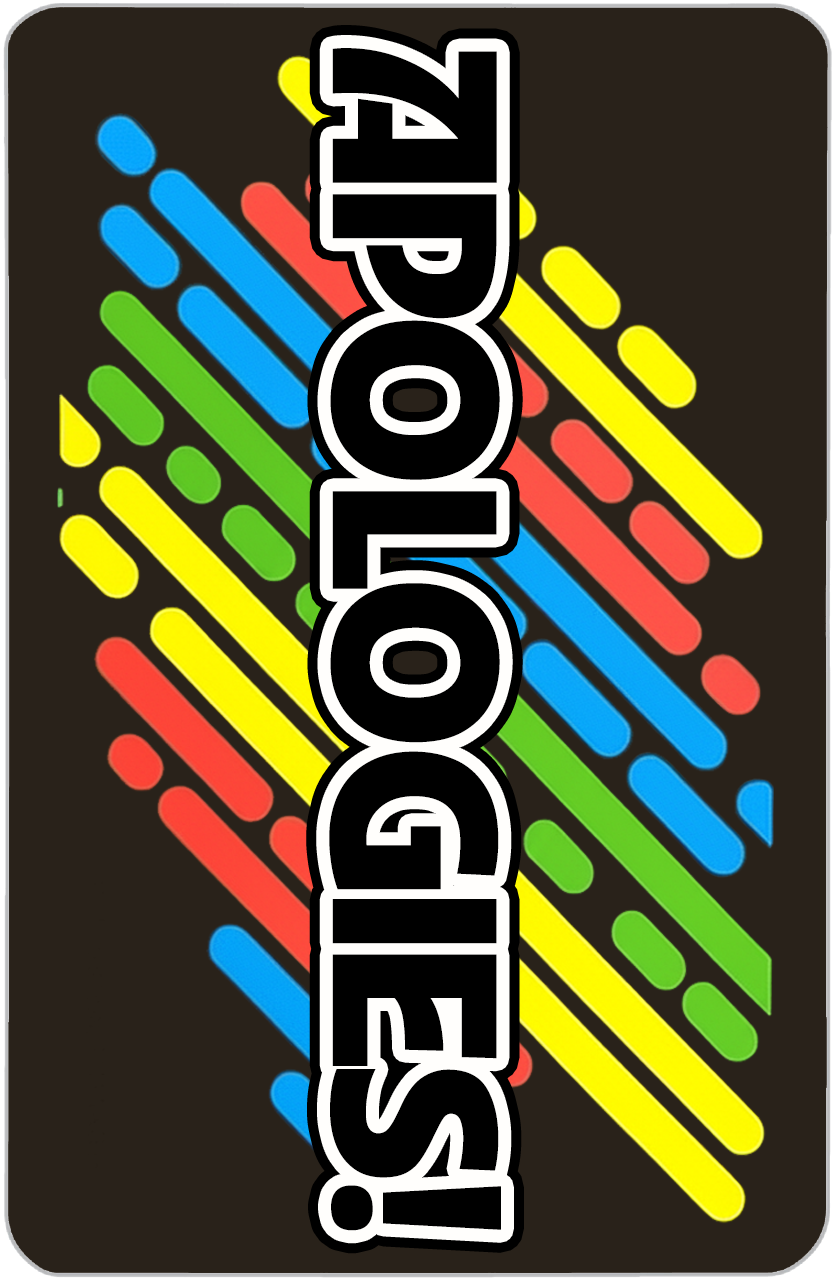
<style>
.page{position:relative;width:837px;height:1280px;background:#29221a}
.page>*{position:absolute;margin:0}
.t1{font:264.4px "AdGothic-Regular";color:#000000}
</style>
<div class="page">
<p class="t1" style="left:329px;top:48px;width:172px;height:1183px;rotate:90deg">APOLOGIES!</p>
</div>
